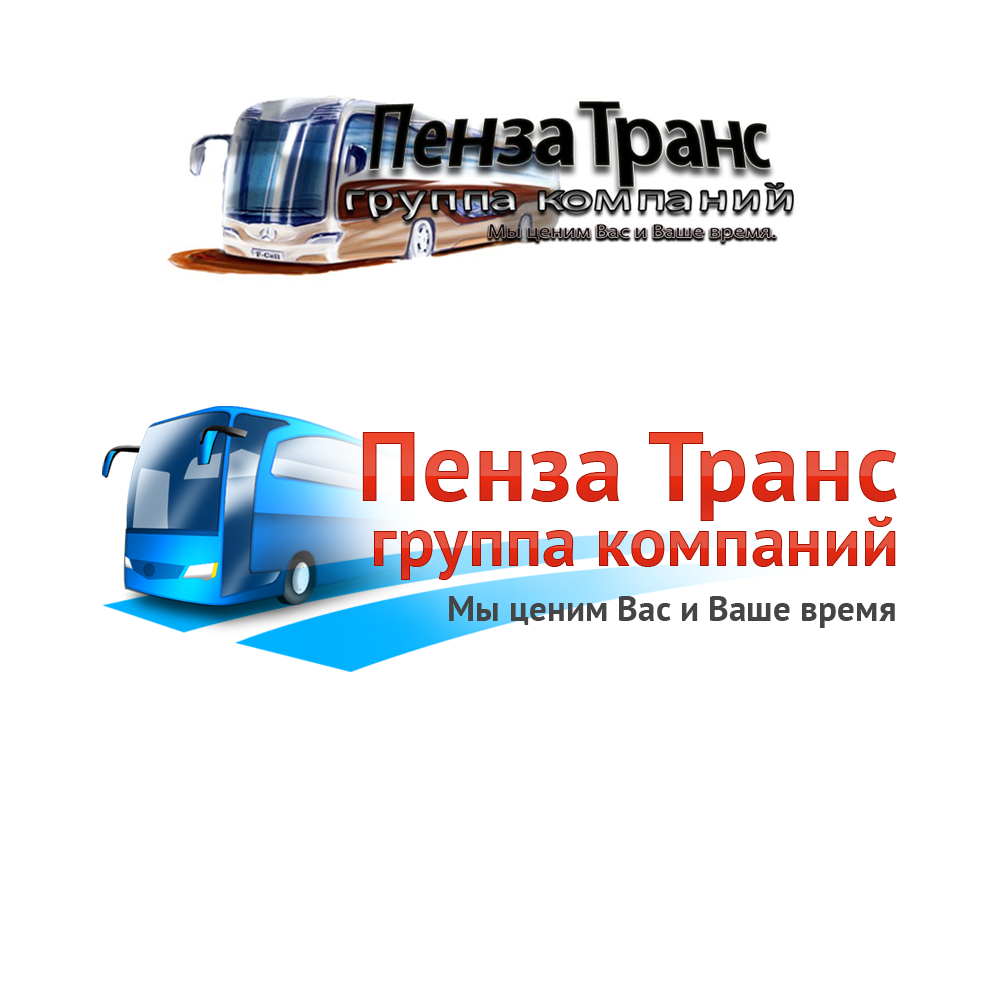
<style>
.page{position:relative;width:1000px;height:1000px;background:#ffffff}
.page>*{position:absolute;margin:0}
.t1{font:98.6px "PTSans-Bold";letter-spacing:0.02em}
.t2{font:70.2px "PTSans-Bold"}
.t3{font:35.3px "PTSans-Bold";color:#454545}
</style>
<div class="page">
<p class="t1" style="left:362px;top:432px;width:535px;height:89px">Пенза Транс</p>
<p class="t2" style="left:374px;top:516px;width:522px;height:64px">группа компаний</p>
<p class="t3" style="left:449px;top:596px;width:446px;height:32px">Мы ценим Вас и Ваше время</p>
</div>
